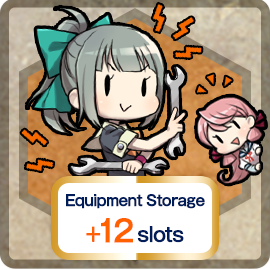
<style>
.page{position:relative;width:270px;height:270px}
.page>*{position:absolute;margin:0}
.t1{font:15px "GothicMB101Pro-Medium";letter-spacing:-0.04em;color:#001d59;font-weight:bold;scale:0.9 1}
.t2{font:20px "GothicMB101Pro-Medium";letter-spacing:-0.04em;color:#ff6000;font-weight:bold;scale:0.9 1}
.t3{font:30px "GothicMB101Pro-Medium";letter-spacing:-0.04em;color:#ff6000;font-weight:bold;scale:0.9 1}
.t4{font:20px "GothicMB101Pro-Medium";letter-spacing:-0.04em;color:#001d59;font-weight:bold;scale:0.9 1}
</style>
<div class="page">
<p class="t1" style="left:66px;top:194px;width:139px;height:49px;text-align:center">Equipment Storage<br><span class="t2">+</span><span class="t3">12 </span><span class="t4">slots</span></p>
</div>
